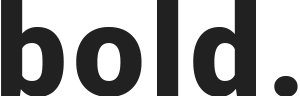
<style>
.page{position:relative;width:300px;height:96px;background:#ffffff}
.page>*{position:absolute;margin:0}
.t1{font:128px "Roboto-Black";letter-spacing:0.04em;color:#212121}
</style>
<div class="page">
<p class="t1" style="left:1px;top:0px;width:297px;height:97px">bold.</p>
</div>
